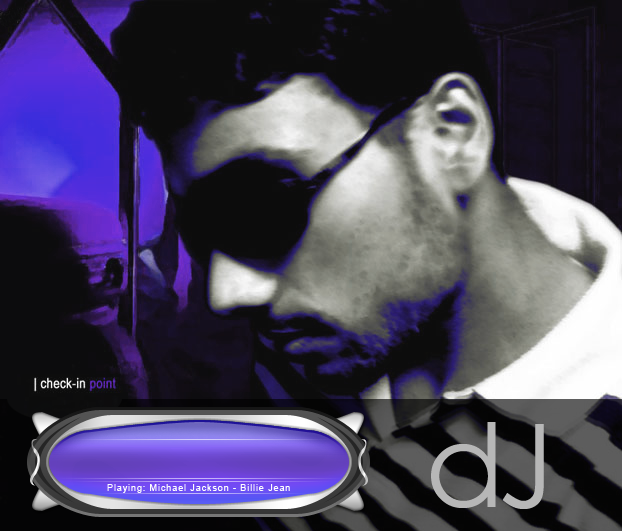
<style>
.page{position:relative;width:622px;height:531px}
.page>*{position:absolute;margin:0}
.t1{font:116.2px "CenturyGothic";letter-spacing:-0.05em;color:#b7b7b7}
.t2{font:9px "ArialMT";letter-spacing:0.1em;color:#fefefe}
</style>
<div class="page">
<p class="t1" style="left:431px;top:422px;width:113px;height:87px">dJ</p>
<p class="t2" style="left:107px;top:484px;width:183px;height:9px">Playing: Michael Jackson - Billie Jean</p>
</div>
